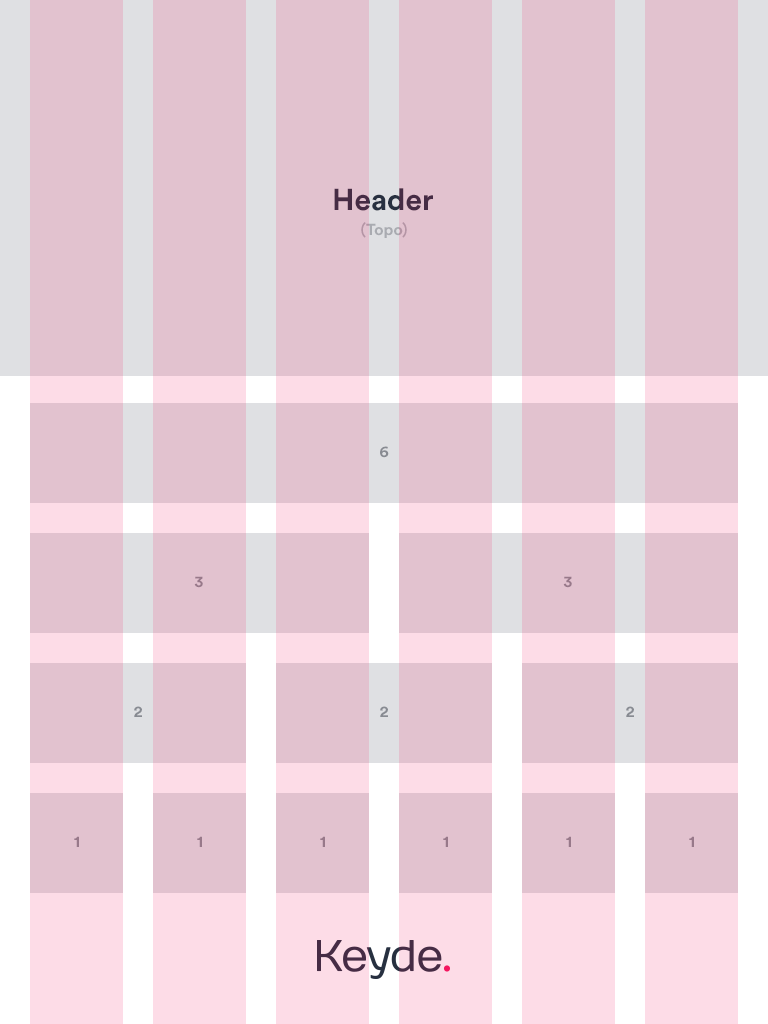
<style>
.page{position:relative;width:768px;height:1024px;background:#e2c2cf}
.page>*{position:absolute;margin:0}
.t1{font:30px "CircularStd-Bold";color:#462c45}
.t2{font:16px "CircularStd-Bold"}
.t3{font:16px "CircularStd-Bold";color:#888b92;text-transform:uppercase}
.t4{font:16px "CircularStd-Bold";color:#98798a;text-transform:uppercase}
</style>
<div class="page">
<p class="t1" style="left:334px;top:188px;width:99px;height:23px">Header</p>
<p class="t2" style="left:361px;top:222px;width:46px;height:16px">(Topo)</p>
<p class="t3" style="left:380px;top:446px;width:9px;height:12px">6</p>
<p class="t4" style="left:194px;top:576px;width:9px;height:12px">3</p>
<p class="t4" style="left:563px;top:576px;width:9px;height:12px">3</p>
<p class="t3" style="left:134px;top:706px;width:8px;height:11px">2</p>
<p class="t3" style="left:380px;top:706px;width:8px;height:11px">2</p>
<p class="t3" style="left:626px;top:706px;width:8px;height:11px">2</p>
<p class="t4" style="left:74px;top:836px;width:5px;height:11px">1</p>
<p class="t4" style="left:197px;top:836px;width:5px;height:11px">1</p>
<p class="t4" style="left:320px;top:836px;width:5px;height:11px">1</p>
<p class="t4" style="left:443px;top:836px;width:5px;height:11px">1</p>
<p class="t4" style="left:566px;top:836px;width:5px;height:11px">1</p>
<p class="t4" style="left:689px;top:836px;width:5px;height:11px">1</p>
</div>
